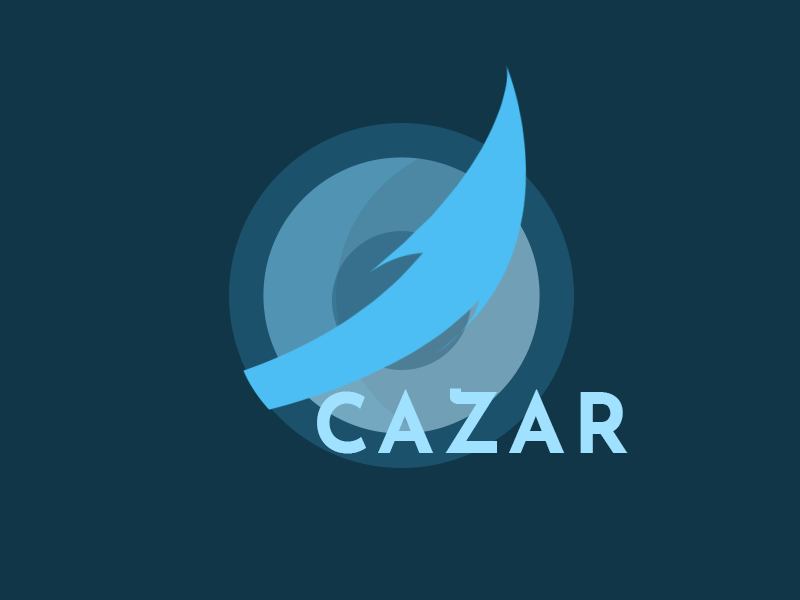
<style>
.page{position:relative;width:800px;height:600px;background:#103648}
.page>*{position:absolute;margin:0}
.t1{font:82px "JosefinSans-Bold";letter-spacing:0.1em;color:#9fe1ff}
</style>
<div class="page">
<p class="t1" style="left:317px;top:388px;width:311px;height:66px">CAZAR</p>
</div>
